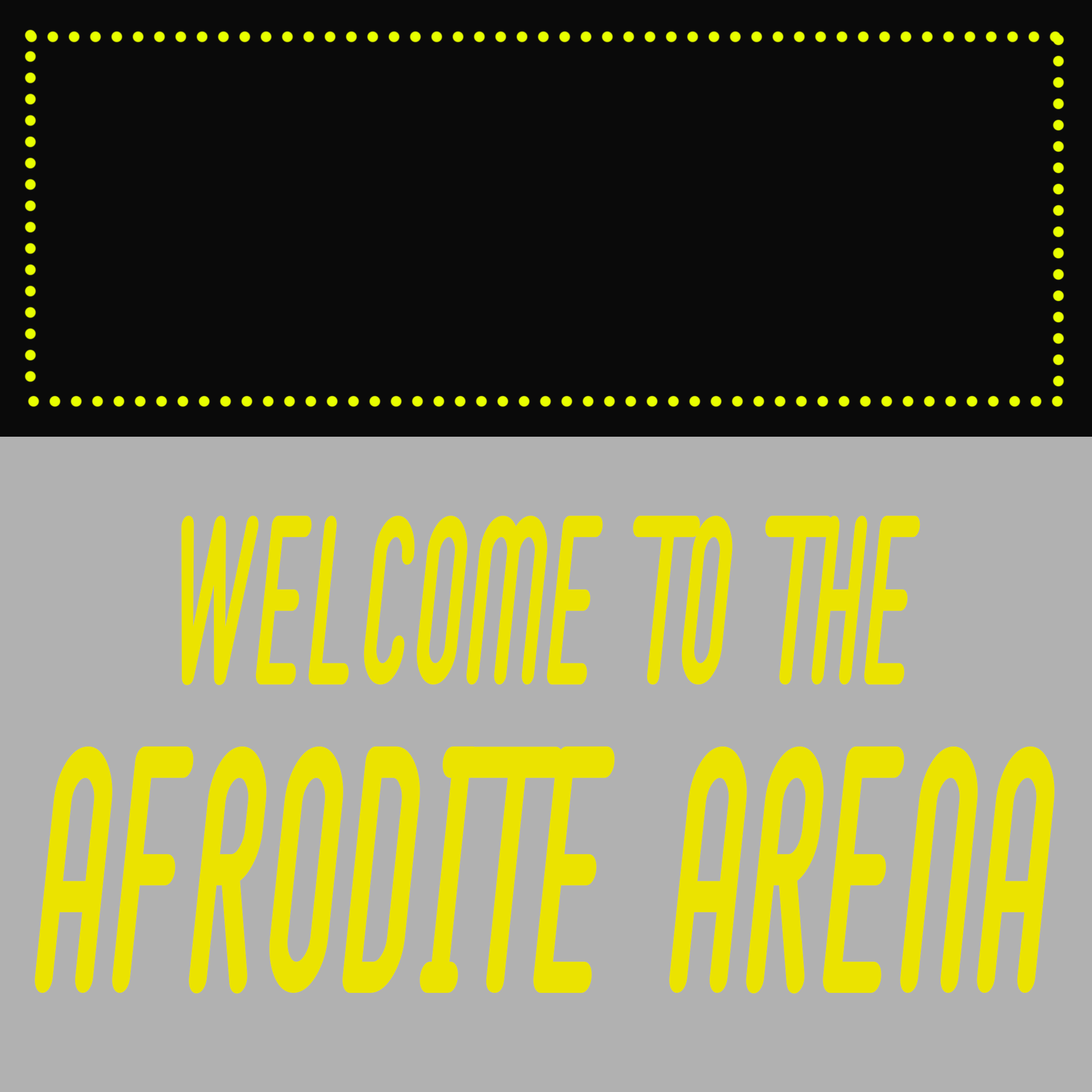
<style>
.page{position:relative;width:1092px;height:1092px;background:#b1b1b1}
.page>*{position:absolute;margin:0}
.t1{font:153.6px/307.7px "BubbleBoy2";color:#ebe300;font-weight:bold;scale:0.5 1}
.t2{font:223.9px/307.7px "BubbleBoy2";color:#ebe300;font-weight:bold;scale:0.5 1}
</style>
<div class="page">
<p class="t1" style="left:35px;top:516px;width:1020px;height:478px;text-align:center">WELCOME TO THE<br><span class="t2">AFRODITE ARENA</span></p>
</div>
